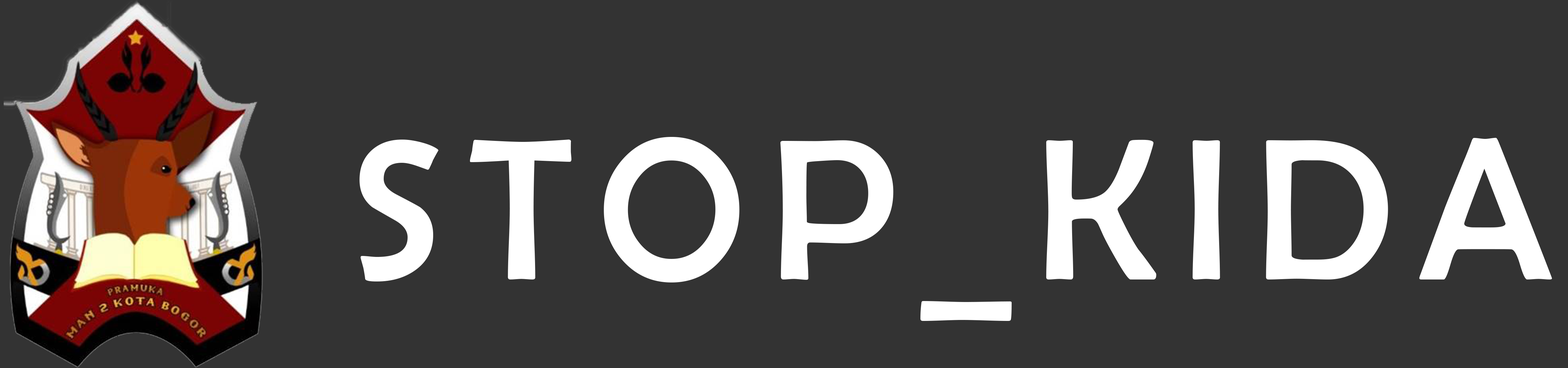
<style>
.page{position:relative;width:1568px;height:368px;background:#333333}
.page>*{position:absolute;margin:0}
.t1{font:203.4px "BerlinSansFB-Reg";letter-spacing:0.003em;color:#ffffff}
</style>
<div class="page">
<p class="t1" style="left:359px;top:137px;width:1193px;height:184px">STOP_KIDA</p>
</div>
